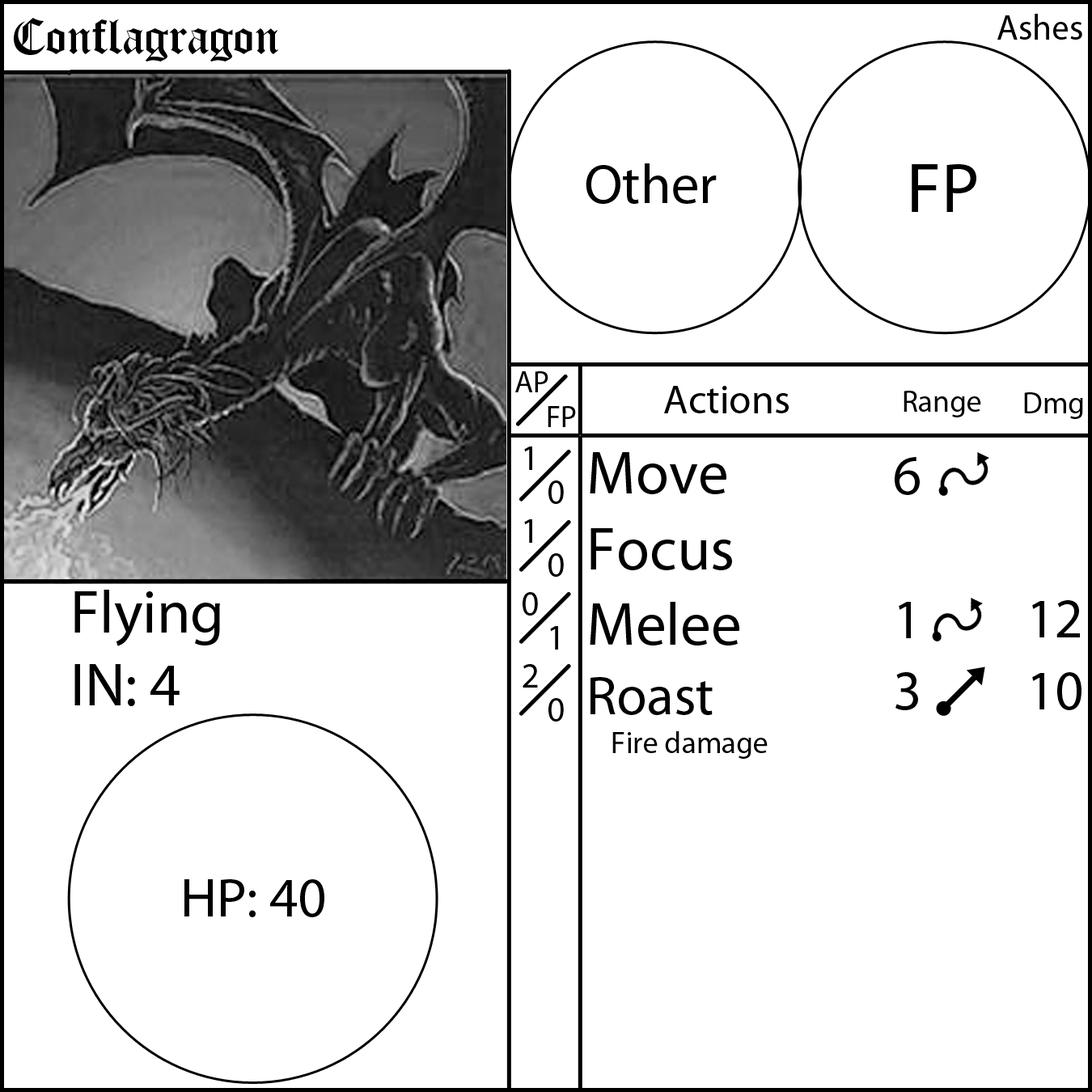
<style>
.page{position:relative;width:1092px;height:1092px;background:#ffffff}
.page>*{position:absolute;margin:0}
.t1{font:55.6px "OldLondon";color:#000000}
.t2{font:35.4px "MyriadPro-Regular";color:#000000}
.t3{font:55.6px "MyriadPro-Regular";color:#000000}
.t4{font:70.8px "MyriadPro-Regular";color:#000000}
.t5{font:30.3px "MyriadPro-Regular";color:#000000}
.t6{font:40.4px "MyriadPro-Regular";color:#000000}
.t7{font:60.7px "MyriadPro-Regular";color:#000000}
</style>
<div class="page">
<p class="t1" style="left:14px;top:18px;width:264px;height:43px">Conflagragon</p>
<p class="t2" style="left:997px;top:14px;width:85px;height:26px">Ashes</p>
<p class="t3" style="left:586px;top:163px;width:131px;height:41px">Other</p>
<p class="t4" style="left:912px;top:164px;width:64px;height:48px">FP</p>
<p class="t5" style="left:515px;top:371px;width:33px;height:21px">AP</p>
<p class="t6" style="left:664px;top:386px;width:125px;height:27px">Actions</p>
<p class="t5" style="left:904px;top:391px;width:77px;height:26px">Range</p>
<p class="t5" style="left:1024px;top:392px;width:59px;height:27px">Dmg</p>
<p class="t5" style="left:548px;top:406px;width:28px;height:21px">FP</p>
<p class="t2" style="left:523px;top:447px;width:15px;height:241px">1<br>1<br>0<br>2</p>
<p class="t7" style="left:590px;top:452px;width:178px;height:307px">Move<br>Focus<br>Melee<br><span class="t3">Roast<br></span><span class="t5"> Fire damage</span></p>
<p class="t3" style="left:895px;top:457px;width:25px;height:253px;text-align:center">6<br><br>1<br>3</p>
<p class="t2" style="left:548px;top:480px;width:16px;height:242px">0<br>0<br>1<br>0</p>
<p class="t7" style="left:74px;top:590px;width:146px;height:116px">Flying<br>IN: 4</p>
<p class="t3" style="left:1032px;top:600px;width:49px;height:110px;text-align:center">12<br>10</p>
<p class="t3" style="left:184px;top:879px;width:140px;height:38px">HP: 40</p>
</div>
